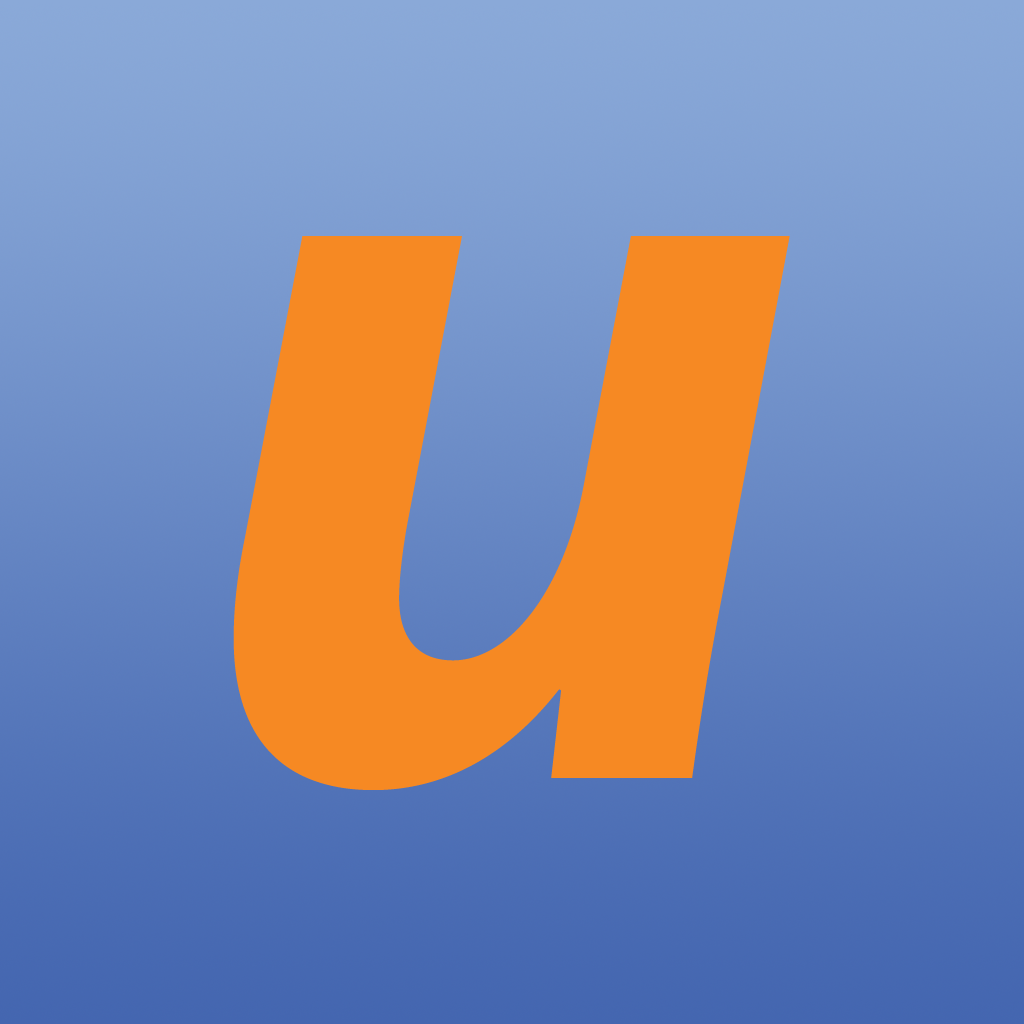
<style>
.page{position:relative;width:1024px;height:1024px}
.page>*{position:absolute;margin:0}
.t1{font:1108.5px "MyriadPro-BoldIt";color:#f68923}
</style>
<div class="page">
<p class="t1" style="left:233px;top:236px;width:557px;height:554px">u</p>
</div>
